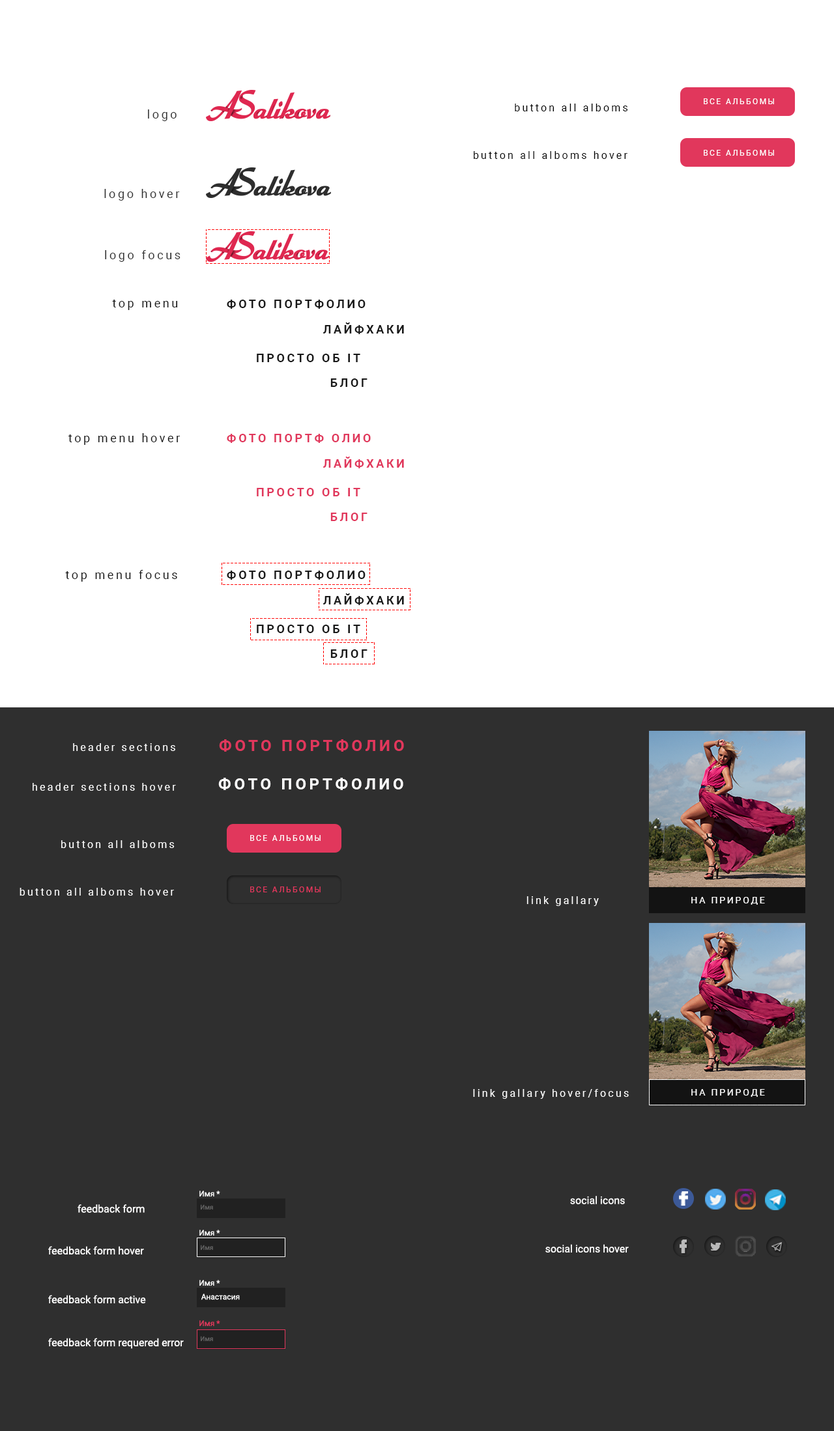
<style>
.page{position:relative;width:834px;height:1431px;background:#ffffff}
.page>*{position:absolute;margin:0}
.t1{font:7.8px "Roboto-Regular";letter-spacing:0.2em;color:#ffffff}
.t2{font:11.7px "Roboto-Regular";letter-spacing:0.2em;color:#323232}
.t3{font:10.4px "Roboto-Regular";letter-spacing:0.2em;color:#000000}
.t4{font:10.4px "Roboto-Regular";letter-spacing:0.2em;color:#010101}
.t5{font:11.7px "Roboto-Regular";letter-spacing:0.2em;color:#191919}
.t6{font:11.7px "Roboto-Bold";letter-spacing:0.2em;color:#191919}
.t7{font:11.7px "Roboto-Bold";letter-spacing:0.2em;color:#e1375c}
.t8{font:10.4px "Roboto-Regular";letter-spacing:0.2em;color:#fefefe}
.t9{font:15.6px "Roboto-Bold";letter-spacing:0.2em;color:#e1375c}
.t10{font:15.6px "Roboto-Bold";letter-spacing:0.2em;color:#fffefe}
.t11{font:7.8px "Roboto-Regular";letter-spacing:0.2em;color:#e1375c}
.t12{font:9.1px "Roboto-Regular";letter-spacing:0.2em;color:#ffffff}
.t13{font:9.1px "Roboto-Regular";letter-spacing:0.2em;color:#fefefe}
.t14{font:7.8px "Roboto-Regular";color:#ffffff}
.t15{font:10.4px "Roboto-Regular";color:#ffffff}
.t16{font:6.5px "Roboto-Regular";color:#636363}
.t17{font:7.8px "Roboto-Regular";color:#fefefe}
.t18{font:7.8px "Roboto-Regular";color:#e1375c}
</style>
<div class="page">
<p class="t1" style="left:703px;top:98px;width:71px;height:6px">ВСЕ АЛЬБОМЫ</p>
<p class="t2" style="left:148px;top:109px;width:28px;height:12px">logo</p>
<p class="t3" style="left:514px;top:104px;width:114px;height:7px">button all alboms</p>
<p class="t1" style="left:703px;top:150px;width:71px;height:6px">ВСЕ АЛЬБОМЫ</p>
<p class="t4" style="left:473px;top:151px;width:154px;height:8px">button all alboms hover</p>
<p class="t2" style="left:104px;top:189px;width:76px;height:12px">logo hover</p>
<p class="t2" style="left:105px;top:250px;width:75px;height:12px">logo focus</p>
<p class="t5" style="left:112px;top:300px;width:66px;height:10px">top menu</p>
<p class="t6" style="left:227px;top:300px;width:138px;height:9px">ФОТО ПОРТФОЛИО</p>
<p class="t6" style="left:323px;top:322px;width:81px;height:12px">ЛАЙФХАКИ</p>
<p class="t6" style="left:257px;top:354px;width:103px;height:8px">ПРОСТО ОБ IT</p>
<p class="t6" style="left:330px;top:378px;width:37px;height:9px">БЛОГ</p>
<p class="t5" style="left:68px;top:433px;width:112px;height:12px">top menu hover</p>
<p class="t7" style="left:227px;top:434px;width:144px;height:9px">ФОТО ПОРТФ ОЛИО</p>
<p class="t7" style="left:323px;top:456px;width:81px;height:12px">ЛАЙФХАКИ</p>
<p class="t7" style="left:257px;top:488px;width:103px;height:8px">ПРОСТО ОБ IT</p>
<p class="t7" style="left:330px;top:512px;width:37px;height:9px">БЛОГ</p>
<p class="t5" style="left:65px;top:570px;width:112px;height:11px">top menu focus</p>
<p class="t6" style="left:227px;top:570px;width:138px;height:10px">ФОТО ПОРТФОЛИО</p>
<p class="t6" style="left:323px;top:593px;width:81px;height:12px">ЛАЙФХАКИ</p>
<p class="t6" style="left:257px;top:624px;width:103px;height:9px">ПРОСТО ОБ IT</p>
<p class="t6" style="left:330px;top:649px;width:37px;height:9px">БЛОГ</p>
<p class="t8" style="left:73px;top:743px;width:102px;height:8px">header sections</p>
<p class="t9" style="left:219px;top:739px;width:185px;height:12px">ФОТО ПОРТФОЛИО</p>
<p class="t8" style="left:33px;top:783px;width:143px;height:8px">header sections hover</p>
<p class="t10" style="left:218px;top:778px;width:185px;height:12px">ФОТО ПОРТФОЛИО</p>
<p class="t8" style="left:61px;top:840px;width:114px;height:8px">button all alboms</p>
<p class="t1" style="left:250px;top:835px;width:70px;height:6px">ВСЕ АЛЬБОМЫ</p>
<p class="t8" style="left:20px;top:888px;width:154px;height:7px">button all alboms hover</p>
<p class="t11" style="left:250px;top:886px;width:70px;height:6px">ВСЕ АЛЬБОМЫ</p>
<p class="t8" style="left:526px;top:896px;width:72px;height:10px">link gallary</p>
<p class="t12" style="left:691px;top:897px;width:73px;height:7px">НА ПРИРОДЕ</p>
<p class="t8" style="left:473px;top:1089px;width:155px;height:10px">link gallary hover/focus</p>
<p class="t13" style="left:691px;top:1089px;width:73px;height:8px">НА ПРИРОДЕ</p>
<p class="t14" style="left:199px;top:1190px;width:21px;height:6px">Имя *</p>
<p class="t15" style="left:77px;top:1204px;width:68px;height:8px">feedback form</p>
<p class="t16" style="left:201px;top:1204px;width:12px;height:5px">Имя</p>
<p class="t15" style="left:570px;top:1196px;width:54px;height:8px">social icons</p>
<p class="t14" style="left:199px;top:1229px;width:21px;height:6px">Имя *</p>
<p class="t15" style="left:48px;top:1246px;width:96px;height:8px">feedback form hover</p>
<p class="t16" style="left:201px;top:1244px;width:12px;height:6px">Имя</p>
<p class="t15" style="left:545px;top:1244px;width:83px;height:8px">social icons hover</p>
<p class="t14" style="left:199px;top:1280px;width:21px;height:5px">Имя *</p>
<p class="t15" style="left:48px;top:1295px;width:98px;height:8px">feedback form active</p>
<p class="t17" style="left:201px;top:1293px;width:39px;height:7px">Анастасия</p>
<p class="t18" style="left:199px;top:1320px;width:21px;height:6px">Имя *</p>
<p class="t15" style="left:48px;top:1338px;width:136px;height:11px">feedback form requered error</p>
<p class="t16" style="left:201px;top:1336px;width:12px;height:5px">Имя</p>
</div>
